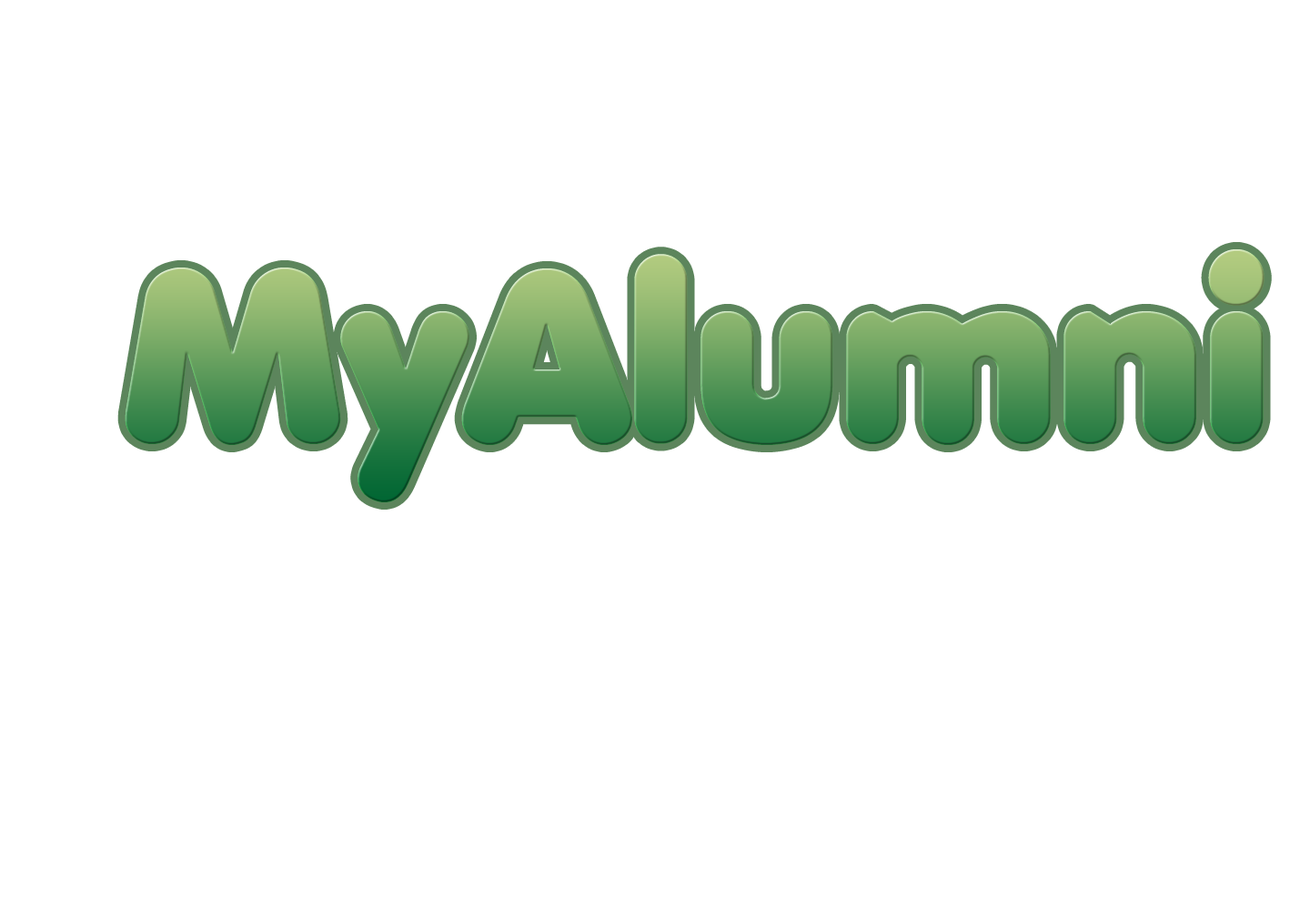
<style>
.page{position:relative;width:1310px;height:910px;background:#ffffff}
.page>*{position:absolute;margin:0}
.t1{font:237px "Anja-Eliane-Nornal"}
</style>
<div class="page">
<p class="t1" style="left:125px;top:249px;width:1140px;height:253px">MyAlumni</p>
</div>
